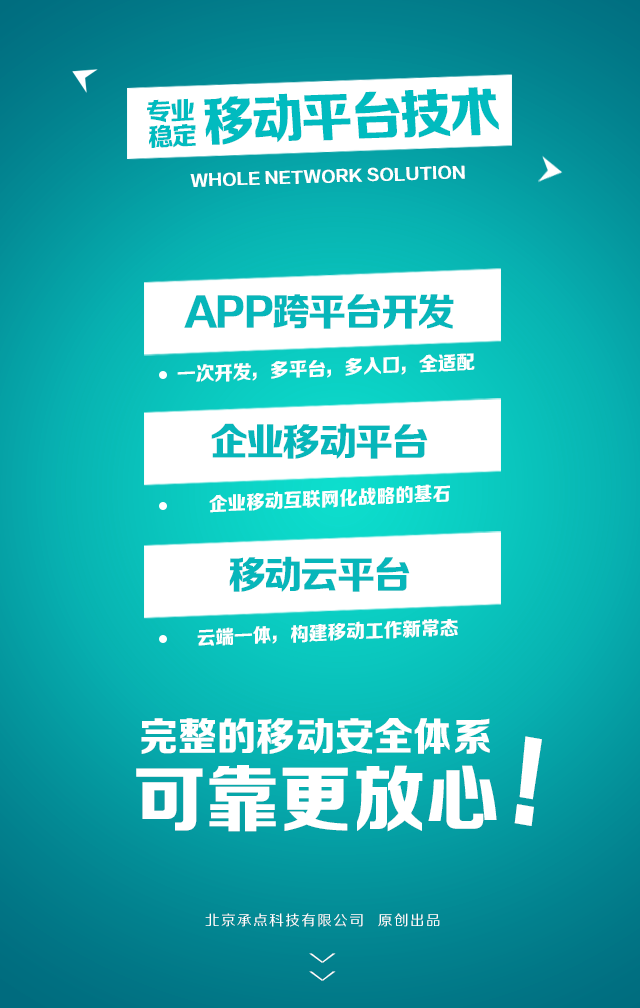
<style>
.page{position:relative;width:640px;height:1008px}
.page>*{position:absolute;margin:0}
.t1{font:53.2px "FZZDHJW--GB1-0";letter-spacing:-0.05em;color:#01bbbf;text-transform:uppercase}
.t2{font:25.2px "FZZDHJW--GB1-0";letter-spacing:-0.05em;color:#01bbbf;text-transform:uppercase}
.t3{font:15.6px "FZZDHJW--GB1-0";letter-spacing:0.005em;color:#ffffff;text-transform:uppercase}
.t4{font:38.5px "FZZDHJW--GB1-0";letter-spacing:-0.05em;color:#07b6ba;text-transform:uppercase}
.t5{font:19.2px "FZZDHJW--GB1-0";color:#ffffff;text-transform:uppercase;scale:0.97 1}
.t6{font:19.2px "FZZDHJW--GB1-0";color:#ffffff;text-transform:uppercase}
.t7{font:39.5px "FZZDHJW--GB1-0";letter-spacing:0.005em;color:#ffffff;text-transform:uppercase}
.t8{font:103.3px "FZZDHJW--GB1-0";letter-spacing:0.005em;color:#ffffff;text-transform:uppercase;scale:0.85 1}
.t9{font:72.8px "FZZDHJW--GB1-0";letter-spacing:0.005em;color:#ffffff;text-transform:uppercase}
.t10{font:14.2px "FZZHJW--GB1-0";letter-spacing:0.1em;color:#ffffff;text-transform:uppercase}
.t11{font:36.8px "FZZXHJW--GB1-0";letter-spacing:0.5em;color:#ffffff;text-transform:uppercase;scale:0.44 1}
</style>
<div class="page">
<p class="t1" style="left:204px;top:87px;width:295px;height:58px;rotate:-2deg">移动平台技术</p>
<p class="t2" style="left:147px;top:98px;width:47px;height:25px;rotate:-3deg">专业</p>
<p class="t2" style="left:149px;top:124px;width:47px;height:24px;rotate:-3deg">稳定</p>
<p class="t3" style="left:190px;top:165px;width:275px;height:22px;rotate:-2deg">Whole network solution</p>
<p class="t4" style="left:184px;top:294px;width:270px;height:35px">App跨平台开发</p>
<p class="t5" style="left:177px;top:353px;width:298px;height:29px;rotate:-2deg">一次开发，多平台，多入口，全适配</p>
<p class="t4" style="left:211px;top:423px;width:217px;height:36px">企业移动平台</p>
<p class="t5" style="left:209px;top:484px;width:241px;height:29px;rotate:-3deg">企业移动互联网化战略的基石</p>
<p class="t4" style="left:229px;top:556px;width:181px;height:36px">移动云平台</p>
<p class="t6" style="left:197px;top:618px;width:261px;height:28px;rotate:-2deg">云端一体，构建移动工作新常态</p>
<p class="t7" style="left:141px;top:718px;width:349px;height:36px">完整的移动安全体系</p>
<p class="t8" style="left:514px;top:736px;width:28px;height:90px;rotate:10deg">!</p>
<p class="t9" style="left:136px;top:765px;width:361px;height:67px">可靠更放心</p>
<p class="t10" style="left:205px;top:913px;width:235px;height:14px">北京承点科技有限公司  原创出品</p>
<p class="t11" style="left:309px;top:953px;width:27px;height:28px;rotate:90deg">&gt;&gt;</p>
</div>
